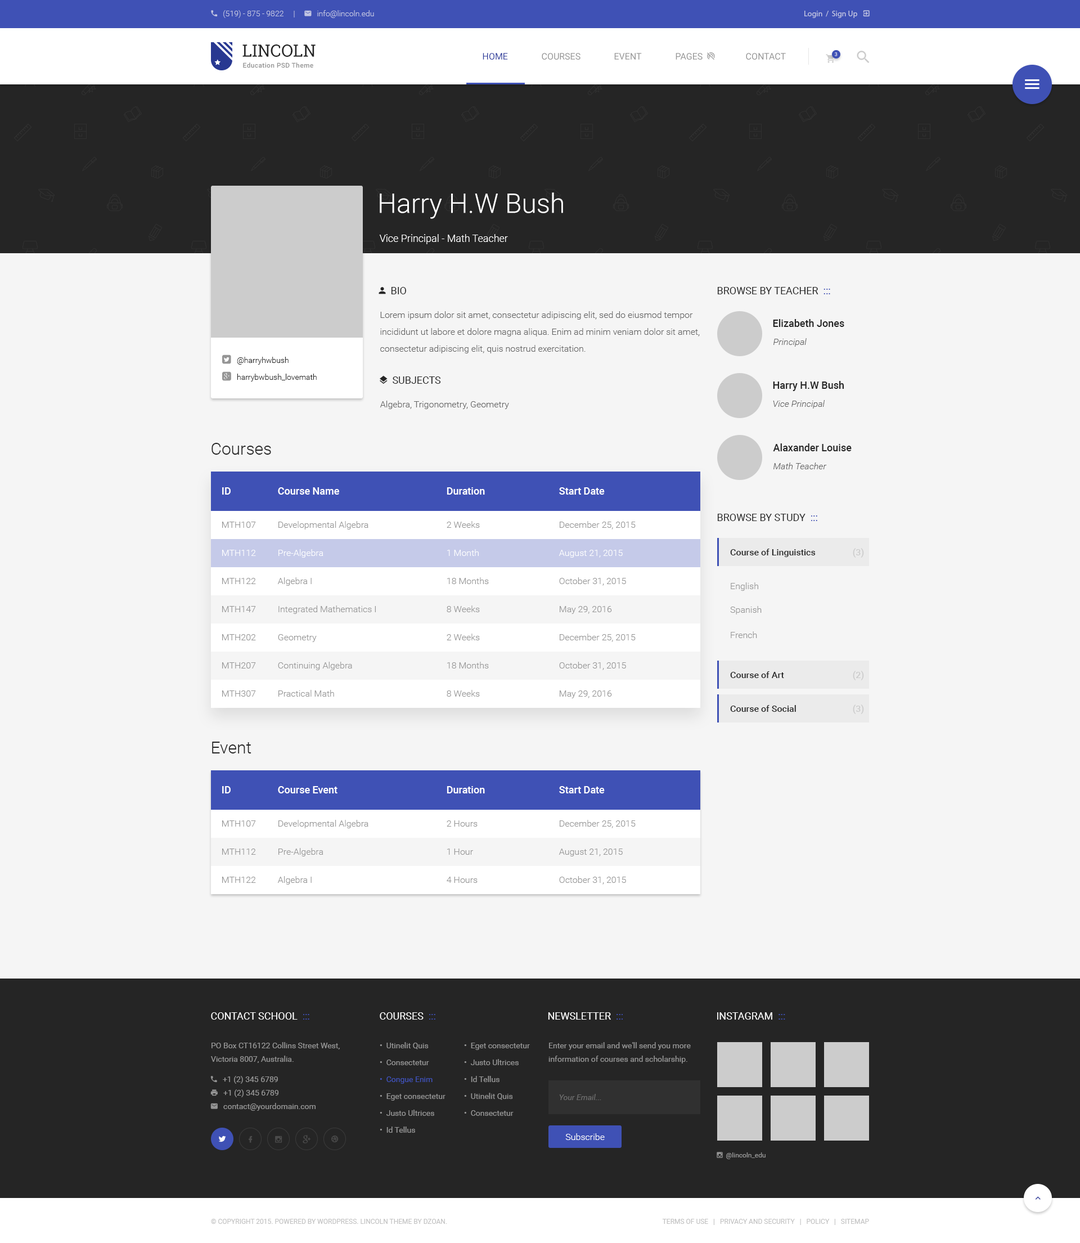
<style>
.page{position:relative;width:1080px;height:1243px;background:#f5f5f5}
.page>*{position:absolute;margin:0}
.t1{font:16.9px "RobotoSlab-Regular";color:#252525;text-transform:uppercase}
.t2{font:9px "Roboto-Regular";color:#303f9f;text-transform:uppercase}
.t3{font:9px "Roboto-Regular";color:#959595;text-transform:uppercase}
.t4{font:5.1px "Roboto-Regular";text-transform:uppercase}
.t5{font:6.8px "Roboto-Medium";letter-spacing:0.03em;color:#959595}
.t6{font:27px "Roboto-Light";color:#ffffff}
.t7{font:10.1px "Roboto-Light";color:#ffffff}
.t8{font:10.1px "Roboto-Regular";color:#252525;text-transform:uppercase}
.t9{font:10.1px "Roboto-Regular";color:#3f51b5;text-transform:uppercase}
.t10{font:9px/16.9px "Roboto-Light";color:#636363}
.t11{font:10.1px "Roboto-Medium";color:#252525}
.t12{font:9px "Roboto-LightItalic";color:#636363}
.t13{font:9px "Roboto-Light";color:#636363}
.t14{font:16.9px "Roboto-Light";color:#252525}
.t15{font:10.1px "Roboto-Medium";color:#ffffff}
.t16{font:9px "Roboto-Light";color:#959595}
.t17{font:9px "Roboto-Light";color:#ffffff}
.t18{font:9px "Roboto-Medium";color:#252525}
.t19{font:9px "Roboto-Medium";color:#cccccc}
.t20{font:10.1px "Roboto-Regular";color:#ffffff;text-transform:uppercase}
.t21{font:7.9px/16.9px "Roboto-Regular";color:#959595}
.t22{font:7.9px/16.9px "Roboto-Regular";color:#3f51b5}
.t23{font:7.9px/13.5px "Roboto-Regular";color:#959595}
.t24{font:7.9px "Roboto-Italic";color:#6c6c6c}
.t25{font:6.8px "Roboto-Regular";color:#c2c2c2;text-transform:uppercase}
</style>
<div class="page">
<p class="t1" style="left:242px;top:44px;width:74px;height:13px">Lincoln</p>
<p class="t2" style="left:483px;top:53px;width:25px;height:7px">Home</p>
<p class="t3" style="left:542px;top:53px;width:38px;height:7px">Courses</p>
<p class="t3" style="left:614px;top:53px;width:28px;height:7px">Event</p>
<p class="t3" style="left:746px;top:53px;width:40px;height:7px">Contact</p>
<p class="t4" style="left:835px;top:52px;width:3px;height:4px">3</p>
<p class="t5" style="left:243px;top:62px;width:70px;height:6px">Education PSD Theme</p>
<p class="t6" style="left:380px;top:192px;width:183px;height:27px">Harry H.W Bush</p>
<p class="t7" style="left:379px;top:234px;width:129px;height:10px">Vice Principal - Math Teacher</p>
<p class="t8" style="left:717px;top:287px;width:113px;height:7px">Browse by Teacher  <span class="t9">:::</span></p>
<p class="t10" style="left:380px;top:311px;width:320px;height:42px">Lorem ipsum dolor sit amet, consectetur adipiscing elit, sed do eiusmod tempor incididunt ut labore et dolore magna aliqua. Enim ad minim veniam dolor sit amet, consectetur adipiscing elit, quis nostrud exercitation.</p>
<p class="t11" style="left:773px;top:319px;width:71px;height:8px">Elizabeth Jones</p>
<p class="t12" style="left:773px;top:338px;width:34px;height:8px">Principal</p>
<p class="t11" style="left:773px;top:381px;width:71px;height:10px">Harry H.W Bush</p>
<p class="t13" style="left:380px;top:400px;width:129px;height:9px">Algebra, Trigonometry, Geometry</p>
<p class="t12" style="left:773px;top:400px;width:52px;height:8px">Vice Principal</p>
<p class="t14" style="left:212px;top:443px;width:59px;height:11px">Courses</p>
<p class="t11" style="left:773px;top:443px;width:79px;height:8px">Alaxander Louise</p>
<p class="t12" style="left:773px;top:462px;width:54px;height:7px">Math Teacher</p>
<p class="t15" style="left:222px;top:487px;width:9px;height:7px">ID</p>
<p class="t15" style="left:278px;top:487px;width:61px;height:7px">Course Name</p>
<p class="t15" style="left:447px;top:487px;width:38px;height:7px">Duration</p>
<p class="t15" style="left:559px;top:487px;width:46px;height:7px">Start Date</p>
<p class="t16" style="left:222px;top:521px;width:34px;height:7px">MTH107</p>
<p class="t16" style="left:278px;top:521px;width:90px;height:8px">Developmental Algebra</p>
<p class="t16" style="left:447px;top:521px;width:33px;height:7px">2 Weeks</p>
<p class="t16" style="left:560px;top:521px;width:76px;height:8px">December 25, 2015</p>
<p class="t8" style="left:717px;top:514px;width:100px;height:7px">Browse by Study  <span class="t9">:::</span></p>
<p class="t17" style="left:222px;top:550px;width:34px;height:6px">MTH112</p>
<p class="t17" style="left:278px;top:549px;width:45px;height:8px">Pre-Algebra</p>
<p class="t17" style="left:447px;top:549px;width:32px;height:7px">1 Month</p>
<p class="t17" style="left:559px;top:550px;width:64px;height:7px">August 21, 2015</p>
<p class="t18" style="left:730px;top:548px;width:86px;height:9px">Course of Linguistics</p>
<p class="t19" style="left:853px;top:548px;width:11px;height:9px">(3)</p>
<p class="t16" style="left:222px;top:578px;width:34px;height:6px">MTH122</p>
<p class="t16" style="left:277px;top:577px;width:35px;height:9px">Algebra I</p>
<p class="t16" style="left:447px;top:577px;width:42px;height:7px">18 Months</p>
<p class="t16" style="left:559px;top:577px;width:67px;height:9px">October 31, 2015</p>
<p class="t16" style="left:731px;top:582px;width:27px;height:9px">English</p>
<p class="t16" style="left:222px;top:606px;width:34px;height:6px">MTH147</p>
<p class="t16" style="left:278px;top:605px;width:98px;height:9px">Integrated Mathematics I</p>
<p class="t16" style="left:447px;top:605px;width:33px;height:7px">8 Weeks</p>
<p class="t16" style="left:560px;top:606px;width:52px;height:8px">May 29, 2016</p>
<p class="t16" style="left:730px;top:606px;width:32px;height:8px">Spanish</p>
<p class="t16" style="left:222px;top:634px;width:34px;height:6px">MTH202</p>
<p class="t16" style="left:278px;top:634px;width:39px;height:8px">Geometry</p>
<p class="t16" style="left:447px;top:633px;width:33px;height:7px">2 Weeks</p>
<p class="t16" style="left:560px;top:633px;width:76px;height:9px">December 25, 2015</p>
<p class="t16" style="left:731px;top:631px;width:26px;height:7px">French</p>
<p class="t16" style="left:222px;top:662px;width:34px;height:6px">MTH207</p>
<p class="t16" style="left:278px;top:662px;width:74px;height:8px">Continuing Algebra</p>
<p class="t16" style="left:447px;top:662px;width:42px;height:6px">18 Months</p>
<p class="t16" style="left:559px;top:662px;width:67px;height:8px">October 31, 2015</p>
<p class="t18" style="left:730px;top:671px;width:54px;height:7px">Course of Art</p>
<p class="t19" style="left:853px;top:670px;width:11px;height:10px">(2)</p>
<p class="t16" style="left:278px;top:690px;width:56px;height:6px">Practical Math</p>
<p class="t16" style="left:447px;top:690px;width:33px;height:6px">8 Weeks</p>
<p class="t16" style="left:222px;top:690px;width:34px;height:6px">MTH307</p>
<p class="t16" style="left:560px;top:690px;width:52px;height:8px">May 29, 2016</p>
<p class="t18" style="left:730px;top:705px;width:66px;height:7px">Course of Social</p>
<p class="t19" style="left:853px;top:704px;width:11px;height:10px">(3)</p>
<p class="t14" style="left:212px;top:741px;width:39px;height:12px">Event</p>
<p class="t15" style="left:222px;top:786px;width:9px;height:7px">ID</p>
<p class="t15" style="left:278px;top:786px;width:60px;height:7px">Course Event</p>
<p class="t15" style="left:447px;top:786px;width:38px;height:7px">Duration</p>
<p class="t15" style="left:559px;top:786px;width:46px;height:7px">Start Date</p>
<p class="t16" style="left:222px;top:820px;width:34px;height:6px">MTH107</p>
<p class="t16" style="left:278px;top:820px;width:90px;height:8px">Developmental Algebra</p>
<p class="t16" style="left:447px;top:820px;width:31px;height:6px">2 Hours</p>
<p class="t16" style="left:560px;top:820px;width:76px;height:8px">December 25, 2015</p>
<p class="t16" style="left:222px;top:848px;width:34px;height:6px">MTH112</p>
<p class="t16" style="left:278px;top:848px;width:45px;height:8px">Pre-Algebra</p>
<p class="t16" style="left:447px;top:848px;width:26px;height:6px">1 Hour</p>
<p class="t16" style="left:559px;top:848px;width:64px;height:8px">August 21, 2015</p>
<p class="t16" style="left:222px;top:876px;width:34px;height:7px">MTH122</p>
<p class="t16" style="left:277px;top:876px;width:35px;height:8px">Algebra I</p>
<p class="t16" style="left:447px;top:876px;width:31px;height:7px">4 Hours</p>
<p class="t16" style="left:559px;top:876px;width:67px;height:8px">October 31, 2015</p>
<p class="t20" style="left:211px;top:1012px;width:98px;height:7px">Contact School  <span class="t9">:::</span></p>
<p class="t20" style="left:380px;top:1012px;width:55px;height:7px">Courses  <span class="t9">:::</span></p>
<p class="t20" style="left:548px;top:1012px;width:75px;height:7px">Newsletter  <span class="t9">:::</span></p>
<p class="t20" style="left:717px;top:1012px;width:68px;height:7px">Instagram  <span class="t9">:::</span></p>
<p class="t21" style="left:380px;top:1042px;width:66px;height:90px">•  Utinelit Quis<br>•  Consectetur<br><span class="t22">•  Congue Enim<br></span>•  Eget consectetur<br>•  Justo Ultrices<br>•  Id Tellus</p>
<p class="t21" style="left:464px;top:1042px;width:66px;height:73px">•  Eget consectetur<br>•  Justo Ultrices<br>•  Id Tellus<br>•  Utinelit Quis<br>•  Consectetur</p>
<p class="t23" style="left:548px;top:1042px;width:143px;height:21px">Enter your email and we'll send you more information of courses and scholarship.</p>
<p class="t24" style="left:559px;top:1094px;width:42px;height:6px">Your Email...</p>
<p class="t17" style="left:565px;top:1133px;width:40px;height:7px">Subscribe</p>
<p class="t25" style="left:211px;top:1218px;width:236px;height:5px">© Copyright 2015. Powered by WordPress. Lincoln Theme by DZOAN.</p>
<p class="t25" style="left:662px;top:1218px;width:207px;height:7px">Terms of Use   |   Privacy and Security   |   Policy   |   Sitemap</p>
</div>
